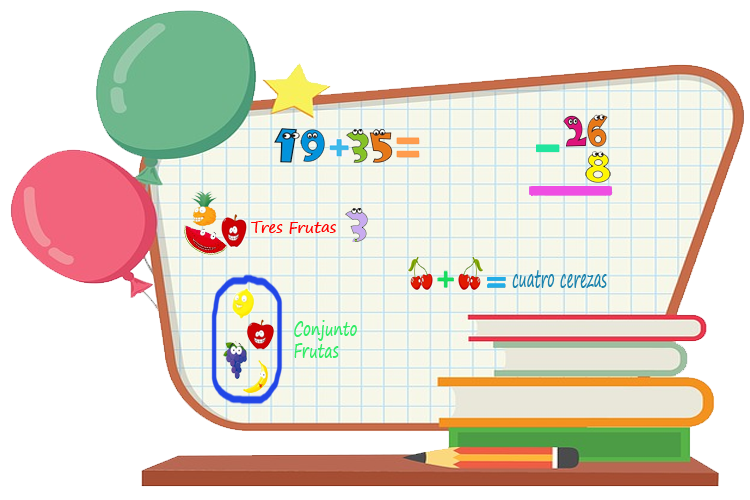
<style>
.page{position:relative;width:750px;height:500px;background:#ffffff}
.page>*{position:absolute;margin:0}
.t1{font:16.3px "SegoePrint";color:#ff0000;scale:0.91 1}
.t2{font:24px "SegoePrint";color:#1d83ae;scale:0.55 1}
.t3{font:18.5px "SegoePrint";color:#32ec66;scale:0.76 1}
</style>
<div class="page">
<p class="t1" style="left:251px;top:221px;width:85px;height:13px">Tres Frutas</p>
<p class="t2" style="left:512px;top:270px;width:95px;height:18px">cuatro cerezas</p>
<p class="t3" style="left:294px;top:320px;width:63px;height:38px">Conjunto<br>Frutas</p>
</div>
